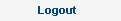
<style>
.page{position:relative;width:121px;height:21px;background:#f5f5f5}
.page>*{position:absolute;margin:0}
.t1{font:11px "Arial-BoldMT";color:#064787}
</style>
<div class="page">
<p class="t1" style="left:38px;top:6px;width:38px;height:10px">Logout</p>
</div>
